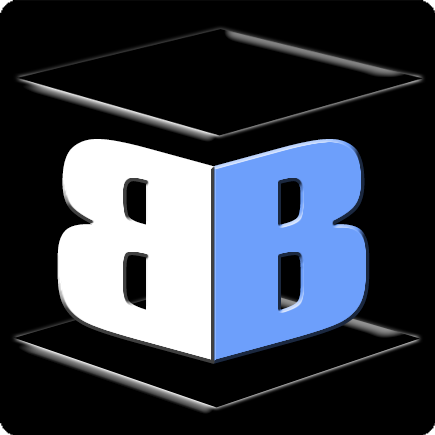
<style>
.page{position:relative;width:435px;height:435px;background:#000000}
.page>*{position:absolute;margin:0}
.t1{font:247px "Impact";color:#ffffff;font-weight:bold;scale:1.36 1}
.t2{font:247px "Impact";color:#6d9ffb;font-weight:bold;scale:1.36 1}
</style>
<div class="page">
<p class="t1" style="left:57px;top:139px;width:158px;height:225px;rotate:-165deg">B</p>
<p class="t2" style="left:212px;top:139px;width:158px;height:225px;rotate:-15deg">B</p>
</div>
